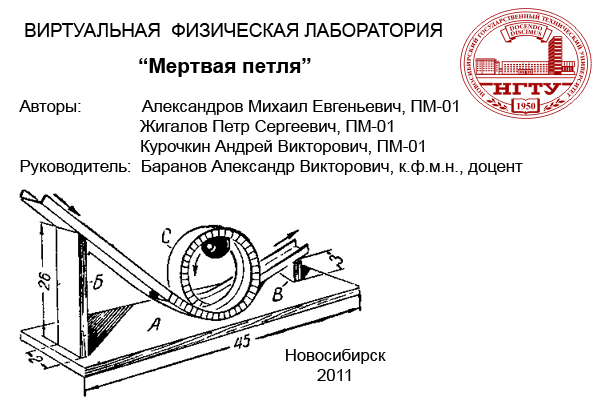
<style>
.page{position:relative;width:600px;height:400px;background:#ffffff}
.page>*{position:absolute;margin:0}
.t1{font:18.8px "ArialMT";color:#000000}
.t2{font:20.8px "Arial-BoldMT";color:#000000}
.t3{font:16.7px "ArialMT";color:#000000}
</style>
<div class="page">
<p class="t1" style="left:25px;top:23px;width:417px;height:14px">ВИРТУАЛЬНАЯ  ФИЗИЧЕСКАЯ ЛАБОРАТОРИЯ</p>
<p class="t2" style="left:139px;top:58px;width:172px;height:19px">“Мертвая петля”</p>
<p class="t3" style="left:19px;top:100px;width:504px;height:75px">Авторы:             Александров Михаил Евгеньевич, ПМ-01<br>                          Жигалов Петр Сергеевич, ПМ-01<br>                          Курочкин Андрей Викторович, ПМ-01<br>Руководитель:  Баранов Александр Викторович, к.ф.м.н., доцент</p>
<p class="t3" style="left:286px;top:349px;width:100px;height:32px;text-align:center">Новосибирск<br>2011</p>
</div>
